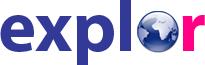
<style>
.page{position:relative;width:205px;height:65px;background:#ffffff}
.page>*{position:absolute;margin:0}
.t1{font:72px "MyriadPro-Bold";color:#323996}
.t2{font:72px "MyriadPro-Bold";color:#ff0084}
</style>
<div class="page">
<p class="t1" style="left:0px;top:0px;width:205px;height:65px">expl   <span class="t2">r</span></p>
</div>
